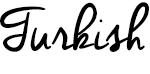
<style>
.page{position:relative;width:150px;height:74px;background:#ffffff}
.page>*{position:absolute;margin:0}
.t1{font:57.6px "CheddarJack";color:#000000}
</style>
<div class="page">
<p class="t1" style="left:0px;top:2px;width:149px;height:50px">Turkish</p>
</div>
